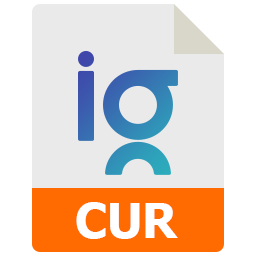
<style>
.page{position:relative;width:256px;height:256px;background:#eaeaea}
.page>*{position:absolute;margin:0}
.t1{font:48px "Tahoma-Bold";color:#ffffff}
</style>
<div class="page">
<p class="t1" style="left:76px;top:202px;width:102px;height:37px">CUR</p>
</div>
